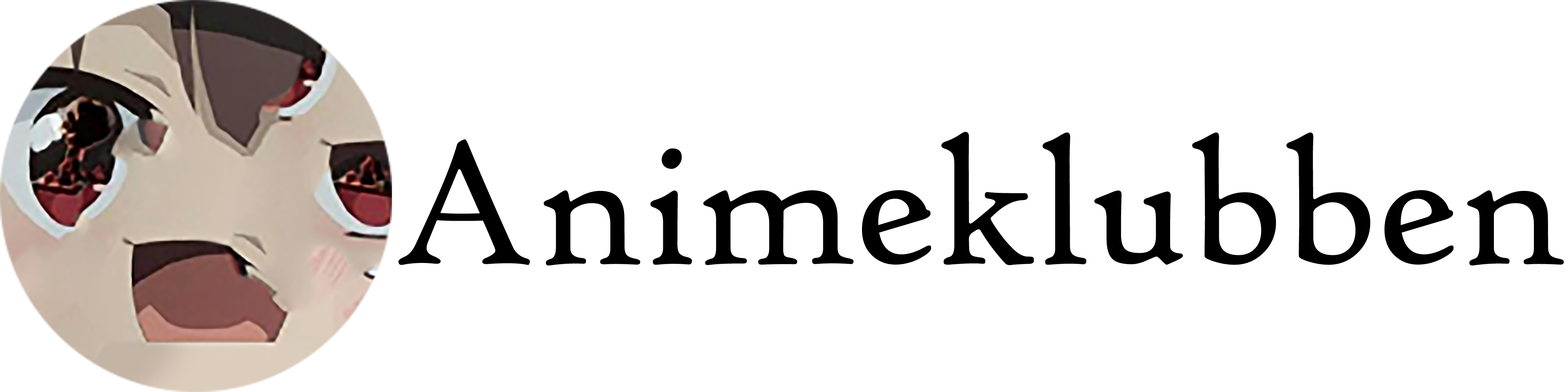
<style>
.page{position:relative;width:1568px;height:392px;background:#ffffff}
.page>*{position:absolute;margin:0}
.t1{font:188.2px "HighTowerText-Reg";color:#000000}
</style>
<div class="page">
<p class="t1" style="left:398px;top:132px;width:1166px;height:134px">Animeklubben</p>
</div>
